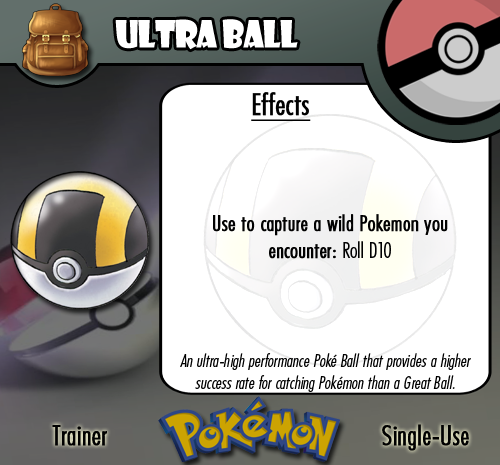
<style>
.page{position:relative;width:500px;height:465px;background:#ffffff}
.page>*{position:absolute;margin:0}
.t1{font:36.7px "ShowcardGothic-Reg";letter-spacing:-0.025em;color:#ffffff;scale:0.91 1}
.t2{font:22.2px "FuturaCondensedBQ-Light";color:#010101;font-weight:bold}
.t3{font:27.8px "FuturaCondensedBQ-Light";color:#010101;font-weight:bold}
.t4{font:30.6px "FuturaCondensedBQ-Light";color:#010101;font-weight:bold;text-decoration:underline}
.t5{font:22.2px "FuturaCondensedBQ-Light";color:#010101}
.t6{font:18.1px "FuturaCondensedBQ-Light";color:#010101;font-style:italic}
</style>
<div class="page">
<p class="t1" style="left:115px;top:19px;width:183px;height:31px">Ultra Ball</p>
<p class="t2" style="left:213px;top:92px;width:235px;height:167px"><span class="t3">  </span><span class="t4">Effects<br><br><br><br><br><br><br></span>Use to capture a wild Pokemon you encounter: <span class="t5">Roll D10</span></p>
<p class="t6" style="left:180px;top:353px;width:291px;height:39px;text-align:center">An ultra-high performance Poké Ball that provides a higher success rate for catching Pokémon than a Great Ball.</p>
<p class="t3" style="left:52px;top:425px;width:55px;height:21px">Trainer</p>
<p class="t3" style="left:382px;top:424px;width:87px;height:27px">Single-Use</p>
</div>
